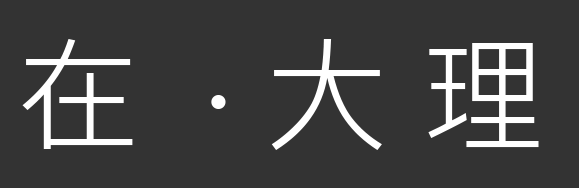
<style>
.page{position:relative;width:579px;height:188px;background:#333333}
.page>*{position:absolute;margin:0}
.t1{font:125px "MicrosoftJhengHeiRegular";letter-spacing:0.26em;color:#ffffff}
.t2{font:125px "MicrosoftJhengHeiRegular";color:#ffffff}
</style>
<div class="page">
<p class="t1" style="left:22px;top:39px;width:517px;height:111px">在<span class="t2">·</span>大理</p>
</div>
